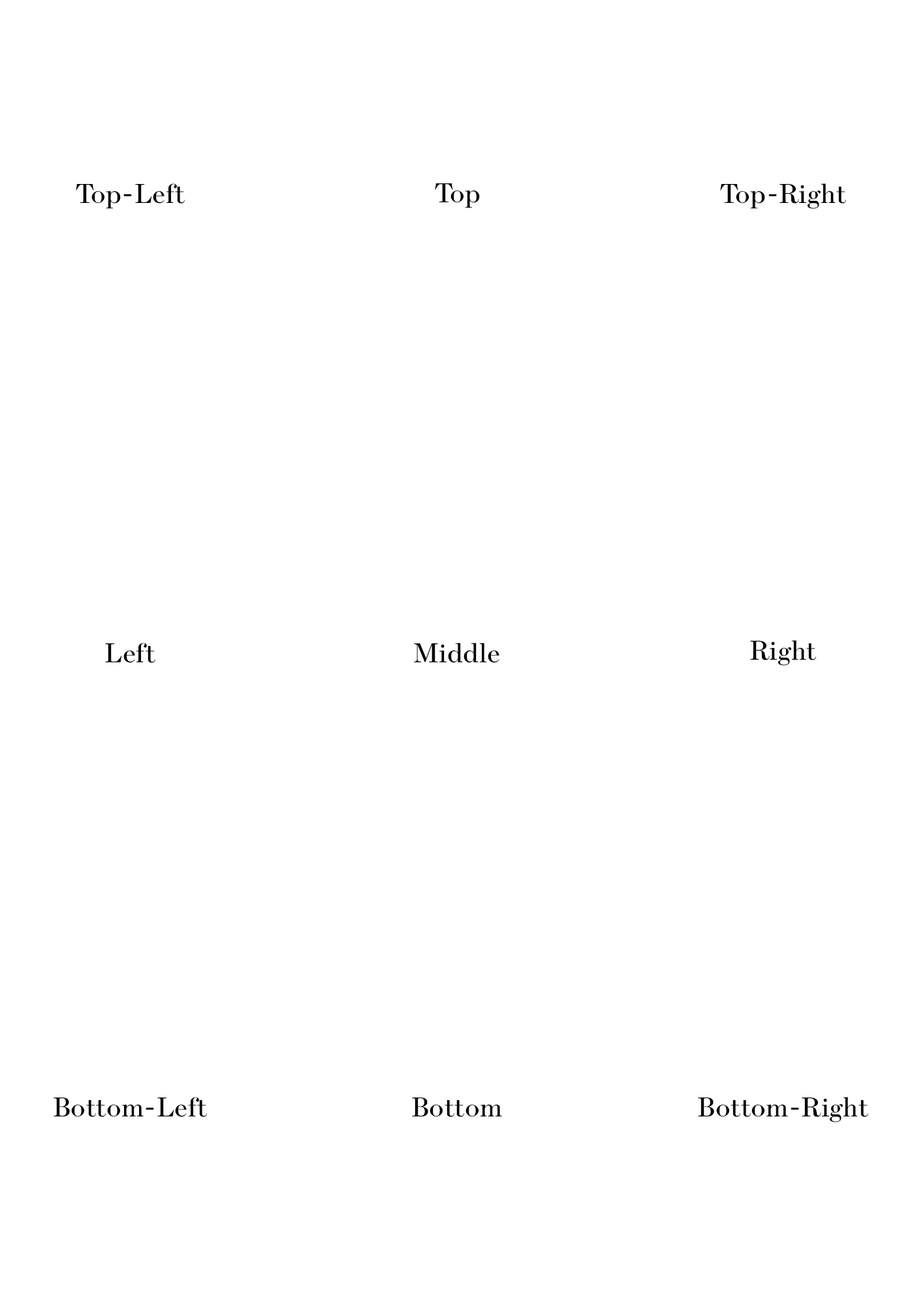
<style>
.page{position:relative;width:914px;height:1305px;background:#ffffff}
.page>*{position:absolute;margin:0}
.t1{font:27.4px "Escrow-Roman";letter-spacing:0.01em;color:#000000}
</style>
<div class="page">
<p class="t1" style="left:76px;top:183px;width:109px;height:26px">Top-Left</p>
<p class="t1" style="left:435px;top:183px;width:45px;height:25px">Top</p>
<p class="t1" style="left:720px;top:183px;width:126px;height:26px">Top-Right</p>
<p class="t1" style="left:750px;top:640px;width:66px;height:26px">Right</p>
<p class="t1" style="left:105px;top:643px;width:50px;height:20px">Left</p>
<p class="t1" style="left:414px;top:643px;width:85px;height:20px">Middle</p>
<p class="t1" style="left:54px;top:1097px;width:153px;height:20px">Bottom-Left</p>
<p class="t1" style="left:412px;top:1098px;width:90px;height:19px">Bottom</p>
<p class="t1" style="left:698px;top:1097px;width:170px;height:25px">Bottom-Right</p>
</div>
